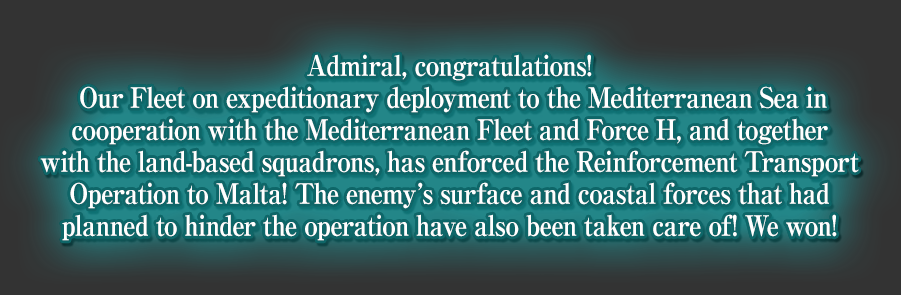
<style>
.page{position:relative;width:901px;height:295px}
.page>*{position:absolute;margin:0}
.t1{font:28px/32px "RyuminPro-ExBold";letter-spacing:-0.04em;color:#ffffff;scale:0.9 1}
</style>
<div class="page">
<p class="t1" style="left:40px;top:54px;width:819px;height:187px;text-align:center">Admiral, congratulations!<br> Our Fleet on expeditionary deployment to the Mediterranean Sea in<br>cooperation with the Mediterranean Fleet and Force H, and together<br>with the land-based squadrons, has enforced the Reinforcement Transport<br>Operation to Malta! The enemy’s surface and coastal forces that had<br>planned to hinder the operation have also been taken care of! We won!</p>
</div>
